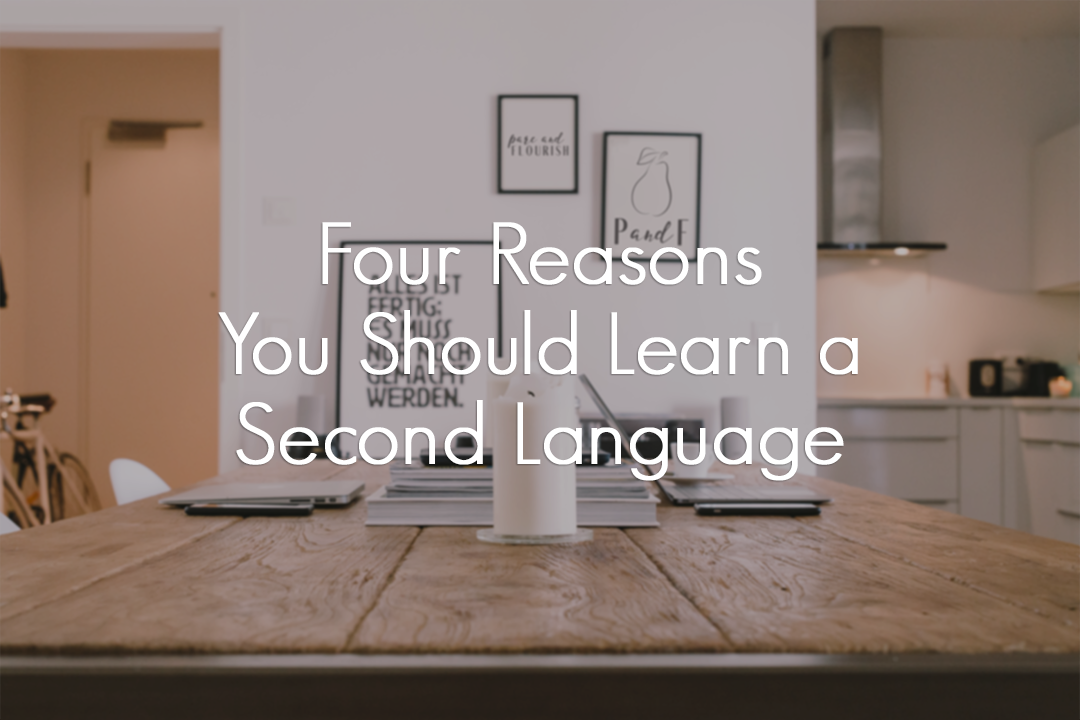
<style>
.page{position:relative;width:1080px;height:720px}
.page>*{position:absolute;margin:0}
.t1{font:85px/90px "GeosansLight";color:#ffffff;font-weight:bold}
</style>
<div class="page">
<p class="t1" style="left:218px;top:222px;width:640px;height:259px;text-align:center">Four Reasons <br>You Should Learn a Second Language</p>
</div>
